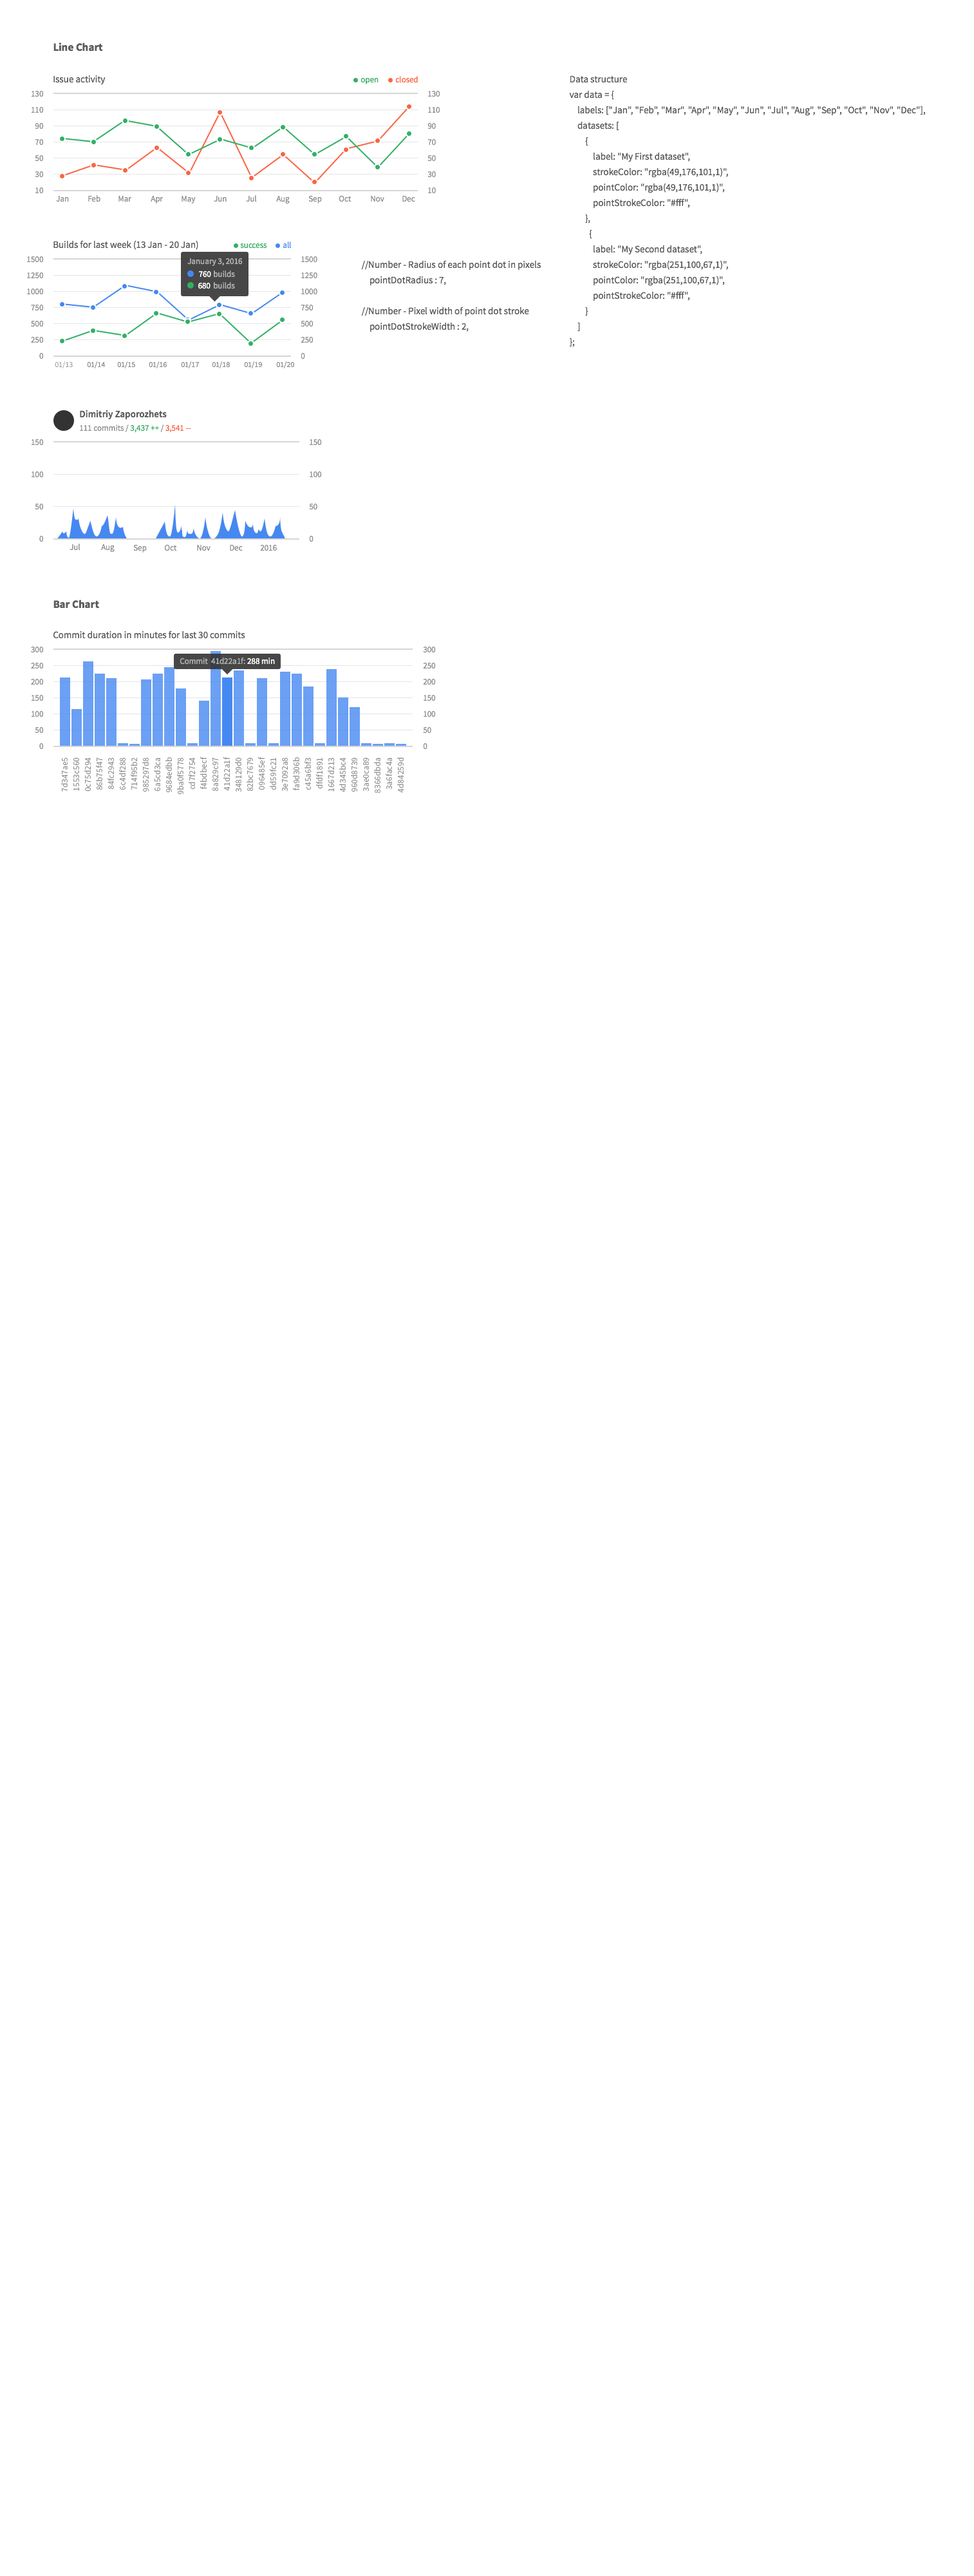
<style>
.page{position:relative;width:974px;height:2576px;background:#ffffff}
.page>*{position:absolute;margin:0}
.t1{font:10.9px "SourceSansPro-Bold";color:#5c5c5c}
.t2{font:9.7px "SourceSansPro-Regular";color:#5c5c5c}
.t3{font:8.4px "SourceSansPro-Regular";color:#31b065}
.t4{font:8.4px "SourceSansPro-Regular";color:#fb6443}
.t5{font:9.7px/15.5px "SourceSansPro-Regular";color:#5c5c5c}
.t6{font:8.4px/16.1px "SourceSansPro-Regular";color:#8f8f8f}
.t7{font:8.4px "SourceSansPro-Regular";color:#8f8f8f}
.t8{font:8.4px "SourceSansPro-Regular";color:#4688f1}
.t9{font:8.4px "SourceSansPro-Regular";color:#b3b3b3}
.t10{font:8.4px "SourceSansPro-Regular";color:#ffffff}
.t11{font:7.7px "SourceSansPro-Regular";color:#8f8f8f}
.t12{font:9.7px "SourceSansPro-Semibold";color:#5c5c5c}
.t13{font:8.4px/32.2px "SourceSansPro-Regular";color:#8f8f8f}
.t14{font:8.4px "SourceSansPro-Regular";color:#aeaeae}
.t15{font:8.4px/11.6px "SourceSansPro-Regular";letter-spacing:0.015em;color:#8f8f8f}
</style>
<div class="page">
<p class="t1" style="left:53px;top:43px;width:50px;height:9px">Line Chart</p>
<p class="t2" style="left:53px;top:75px;width:53px;height:10px">Issue activity</p>
<p class="t3" style="left:361px;top:78px;width:18px;height:6px">open</p>
<p class="t4" style="left:395px;top:76px;width:23px;height:7px">closed</p>
<p class="t5" style="left:569px;top:75px;width:357px;height:272px">Data structure<br>var data = {<br>    labels: ["Jan", "Feb", "Mar", "Apr", "May", "Jun", "Jul", "Aug", "Sep", "Oct", "Nov", "Dec"],<br>    datasets: [<br>        {<br>            label: "My First dataset",<br>            strokeColor: "rgba(49,176,101,1)",<br>            pointColor: "rgba(49,176,101,1)",<br>            pointStrokeColor: "#fff",<br>        },<br>          {<br>            label: "My Second dataset",<br>            strokeColor: "rgba(251,100,67,1)",<br>            pointColor: "rgba(251,100,67,1)",<br>            pointStrokeColor: "#fff",<br>        }<br>    ]<br>};</p>
<p class="t6" style="left:31px;top:91px;width:13px;height:103px;text-align:right">130<br>110<br>90<br>70<br>50<br>30<br>10</p>
<p class="t6" style="left:428px;top:91px;width:12px;height:103px">130<br>110<br>90<br>70<br>50<br>30<br>10</p>
<p class="t7" style="left:56px;top:196px;width:13px;height:6px">Jan</p>
<p class="t7" style="left:88px;top:195px;width:12px;height:7px">Feb</p>
<p class="t7" style="left:118px;top:196px;width:14px;height:6px">Mar</p>
<p class="t7" style="left:151px;top:196px;width:13px;height:8px">Apr</p>
<p class="t7" style="left:182px;top:196px;width:14px;height:8px">May</p>
<p class="t7" style="left:214px;top:196px;width:13px;height:6px">Jun</p>
<p class="t7" style="left:246px;top:195px;width:11px;height:7px">Jul</p>
<p class="t7" style="left:276px;top:196px;width:14px;height:8px">Aug</p>
<p class="t7" style="left:308px;top:195px;width:14px;height:9px">Sep</p>
<p class="t7" style="left:339px;top:195px;width:13px;height:7px">Oct</p>
<p class="t7" style="left:371px;top:196px;width:13px;height:6px">Nov</p>
<p class="t7" style="left:402px;top:196px;width:13px;height:6px">Dec</p>
<p class="t2" style="left:53px;top:240px;width:145px;height:10px">Builds for last week (13 Jan - 20 Jan)</p>
<p class="t3" style="left:240px;top:243px;width:27px;height:6px">success</p>
<p class="t8" style="left:283px;top:242px;width:8px;height:7px">all</p>
<p class="t6" style="left:27px;top:256px;width:17px;height:103px;text-align:right">1500<br>1250<br>1000<br>750<br>500<br>250<br>0</p>
<p class="t6" style="left:301px;top:256px;width:16px;height:103px">1500<br>1250<br>1000<br>750<br>500<br>250<br>0</p>
<p class="t9" style="left:187px;top:258px;width:56px;height:8px">January 3, 2016</p>
<p class="t5" style="left:361px;top:260px;width:180px;height:72px">//Number - Radius of each point dot in pixels<br>    pointDotRadius : 7,<br><br>//Number - Pixel width of point dot stroke<br>    pointDotStrokeWidth : 2,</p>
<p class="t10" style="left:199px;top:271px;width:12px;height:7px">760</p>
<p class="t9" style="left:214px;top:270px;width:21px;height:8px">builds</p>
<p class="t10" style="left:198px;top:283px;width:13px;height:6px">680</p>
<p class="t9" style="left:214px;top:282px;width:21px;height:7px">builds</p>
<p class="t11" style="left:55px;top:361px;width:18px;height:7px">01/13</p>
<p class="t11" style="left:87px;top:361px;width:19px;height:7px">01/14</p>
<p class="t11" style="left:117px;top:361px;width:18px;height:7px">01/15</p>
<p class="t11" style="left:149px;top:361px;width:18px;height:7px">01/16</p>
<p class="t11" style="left:181px;top:361px;width:18px;height:7px">01/17</p>
<p class="t11" style="left:212px;top:361px;width:18px;height:7px">01/18</p>
<p class="t11" style="left:244px;top:361px;width:18px;height:7px">01/19</p>
<p class="t11" style="left:276px;top:361px;width:18px;height:7px">01/20</p>
<p class="t12" style="left:80px;top:410px;width:87px;height:9px">Dimitriy Zaporozhets</p>
<p class="t7" style="left:80px;top:424px;width:111px;height:9px">111 commits /<span class="t3"> 3,437 ++ </span>/ <span class="t4">3,541 --</span></p>
<p class="t13" style="left:31px;top:439px;width:13px;height:103px;text-align:right">150<br>100<br>50<br>0</p>
<p class="t13" style="left:309px;top:439px;width:13px;height:103px">150<br>100<br>50<br>0</p>
<p class="t7" style="left:70px;top:544px;width:10px;height:7px">Jul</p>
<p class="t7" style="left:101px;top:544px;width:14px;height:8px">Aug</p>
<p class="t7" style="left:133px;top:544px;width:14px;height:9px">Sep</p>
<p class="t7" style="left:164px;top:544px;width:13px;height:7px">Oct</p>
<p class="t7" style="left:197px;top:545px;width:14px;height:6px">Nov</p>
<p class="t7" style="left:230px;top:545px;width:13px;height:6px">Dec</p>
<p class="t7" style="left:260px;top:545px;width:17px;height:6px">2016</p>
<p class="t1" style="left:53px;top:600px;width:46px;height:9px">Bar Chart</p>
<p class="t2" style="left:53px;top:630px;width:192px;height:9px">Commit duration in minutes for last 30 commits</p>
<p class="t6" style="left:31px;top:647px;width:13px;height:103px;text-align:right">300<br>250<br>200<br>150<br>100<br>50<br>0</p>
<p class="t6" style="left:423px;top:647px;width:13px;height:103px">300<br>250<br>200<br>150<br>100<br>50<br>0</p>
<p class="t14" style="left:180px;top:658px;width:95px;height:7px">Commit  41d22a1f:<span class="t10"> 288 min</span></p>
<p class="t15" style="left:61px;top:757px;width:343px;height:38px;text-align:right;rotate:-90deg">7d347ae5<br>1553c560<br>0c75d294<br>86b75f47<br>84fc2943<br>6c4df288<br>714f95b2<br>985297d8<br>6a5cd3ca<br>9684edbb<br>9ba0f5778<br>cd7f2754<br>f4bdbecf<br>8a829c97<br>41d22a1f<br>348129d0<br>82bc7679<br>096485ef<br>dd59fc21<br>3e7092a8<br>fa9d306b<br>c45a6bf3<br>dfdf1891<br>1667d213<br>4d345bc4<br>960d8739<br>3ae0ca89<br>8366dbda<br>3a6fac4a<br>4d84259d</p>
</div>
